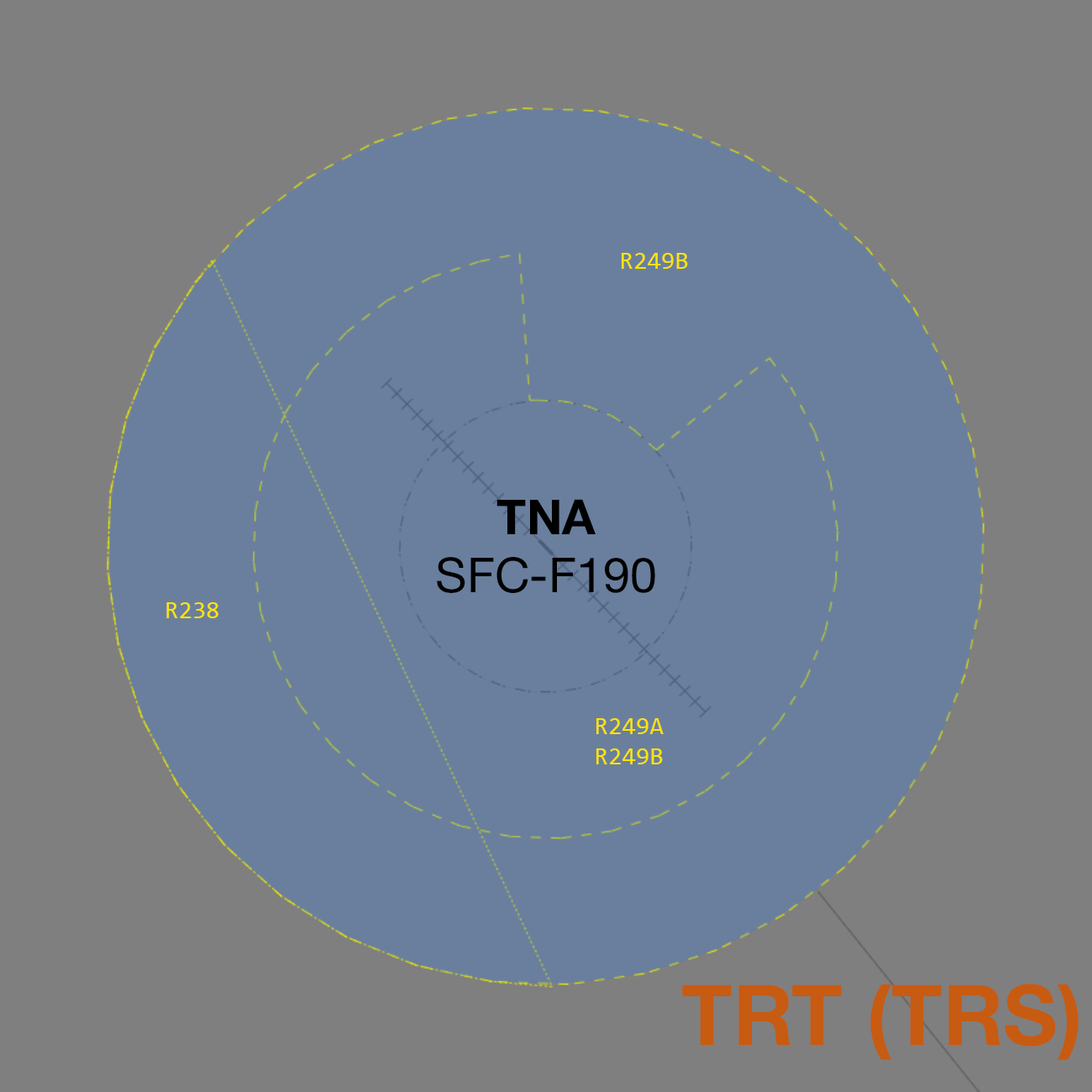
<style>
.page{position:relative;width:1092px;height:1092px;background:#7f7f7f}
.page>*{position:absolute;margin:0}
.t1{font:25.2px "Consolas";color:#ffe400}
.t2{font:48.5px "HelveticaNeue-Roman";color:#000000}
.t3{font:48.5px "HelveticaNeue-Bold";color:#000000}
.t4{font:84px "HelveticaNeue-Bold";color:#c75b12}
</style>
<div class="page">
<p class="t1" style="left:622px;top:253px;width:66px;height:16px">R249B</p>
<p class="t2" style="left:437px;top:499px;width:218px;height:94px;text-align:center"><span class="t3">TNA<br></span>SFC-F190</p>
<p class="t1" style="left:166px;top:602px;width:52px;height:16px">R238</p>
<p class="t1" style="left:596px;top:718px;width:68px;height:46px;text-align:center">R249A<br>R249B</p>
<p class="t4" style="left:682px;top:984px;width:397px;height:76px">TRT (TRS)</p>
</div>
